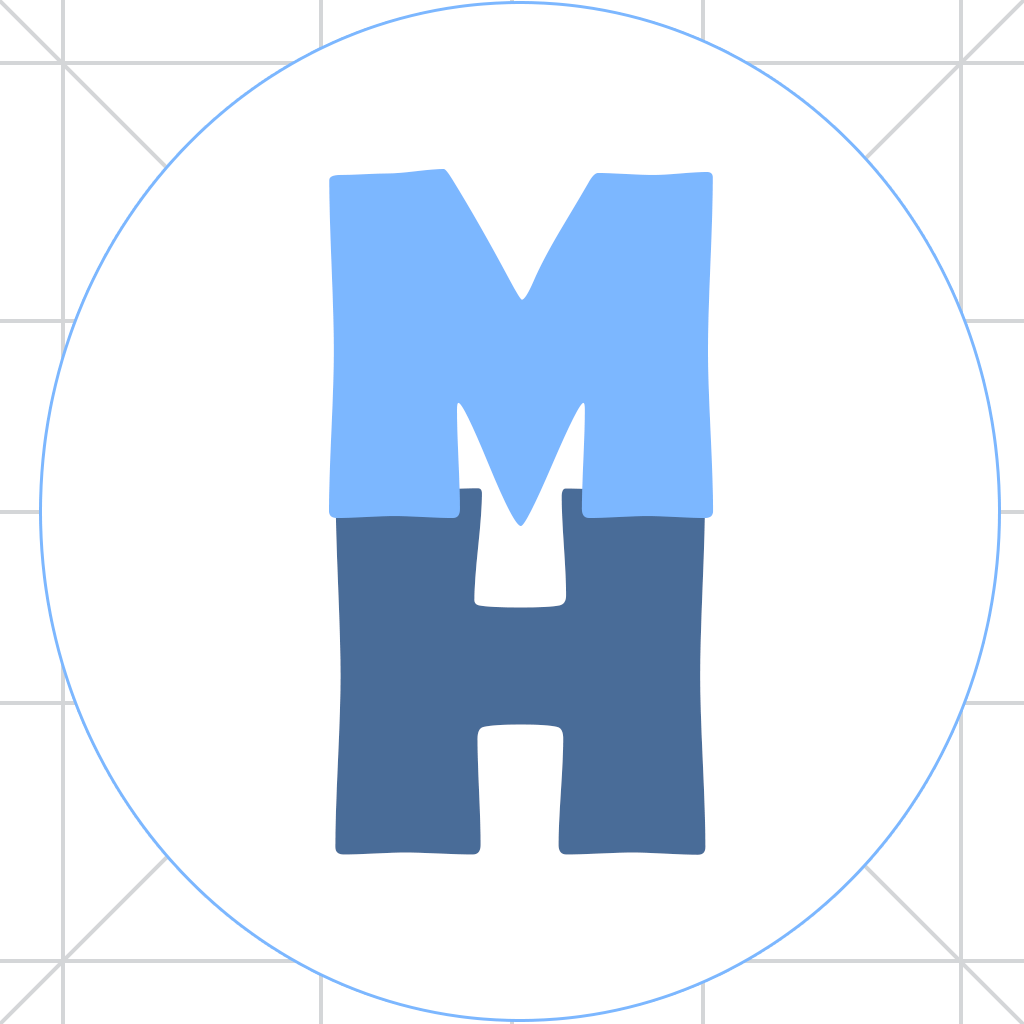
<style>
.page{position:relative;width:1024px;height:1024px;background:#ffffff}
.page>*{position:absolute;margin:0}
.t1{font:500px "BerlinSansFB-Bold";color:#7cb7ff}
.t2{font:534px "BerlinSansFB-Bold";color:#496c98}
</style>
<div class="page">
<p class="t1" style="left:329px;top:169px;width:385px;height:357px">M</p>
<p class="t2" style="left:335px;top:488px;width:371px;height:367px">H</p>
</div>
